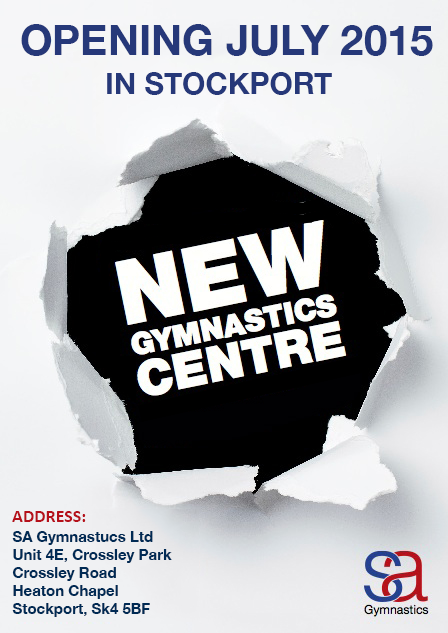
<style>
.page{position:relative;width:448px;height:633px}
.page>*{position:absolute;margin:0}
.t1{font:42px "HelveticaNeue-Bold";color:#263879}
.t2{font:30px "HelveticaNeue-Bold";color:#263879}
.t3{font:18px "Calibri-Bold";color:#b5101a}
.t4{font:15px "HelveticaNeue-Bold";color:#002a54}
</style>
<div class="page">
<p class="t1" style="left:21px;top:24px;width:412px;height:32px">OPENING JULY 2015</p>
<p class="t2" style="left:107px;top:72px;width:225px;height:23px">IN STOCKPORT</p>
<p class="t3" style="left:12px;top:511px;width:74px;height:11px">ADDRESS:</p>
<p class="t4" style="left:12px;top:531px;width:160px;height:86px;text-align:right">SA Gymnastucs Ltd<br>Unit 4E, Crossley Park<br>Crossley Road<br>Heaton Chapel<br>Stockport, Sk4 5BF</p>
</div>
